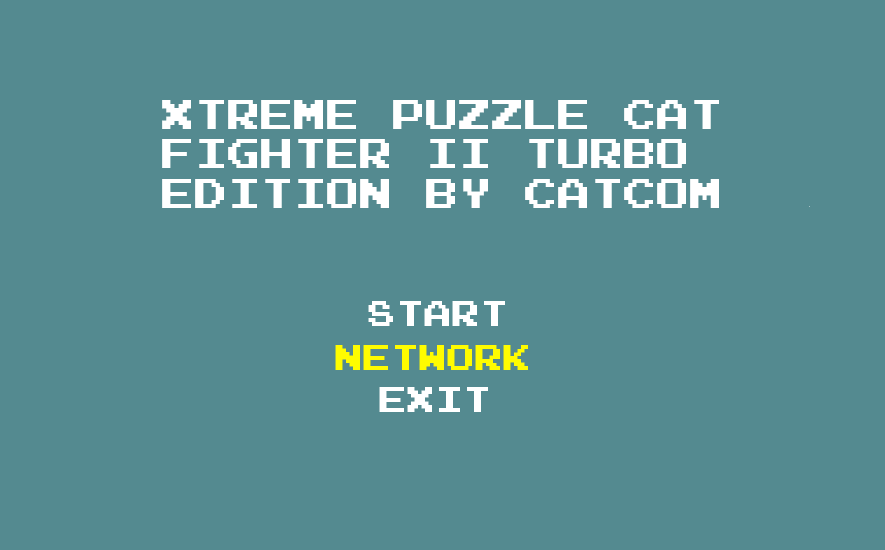
<style>
.page{position:relative;width:885px;height:550px;background:#548a90}
.page>*{position:absolute;margin:0}
.t1{font:33px "Emulogic";color:#ffffff}
.t2{font:28px "Emulogic";color:#ffffff}
.t3{font:28px "Emulogic";color:#fffc00}
</style>
<div class="page">
<p class="t1" style="left:162px;top:100px;width:557px;height:108px">XTREME PUZZLE CAT FIGHTER II TURBO EDITION BY CATCOM</p>
<p class="t2" style="left:368px;top:301px;width:137px;height:25px">START</p>
<p class="t3" style="left:335px;top:345px;width:193px;height:25px">Network</p>
<p class="t2" style="left:379px;top:387px;width:109px;height:25px">EXIT</p>
</div>
